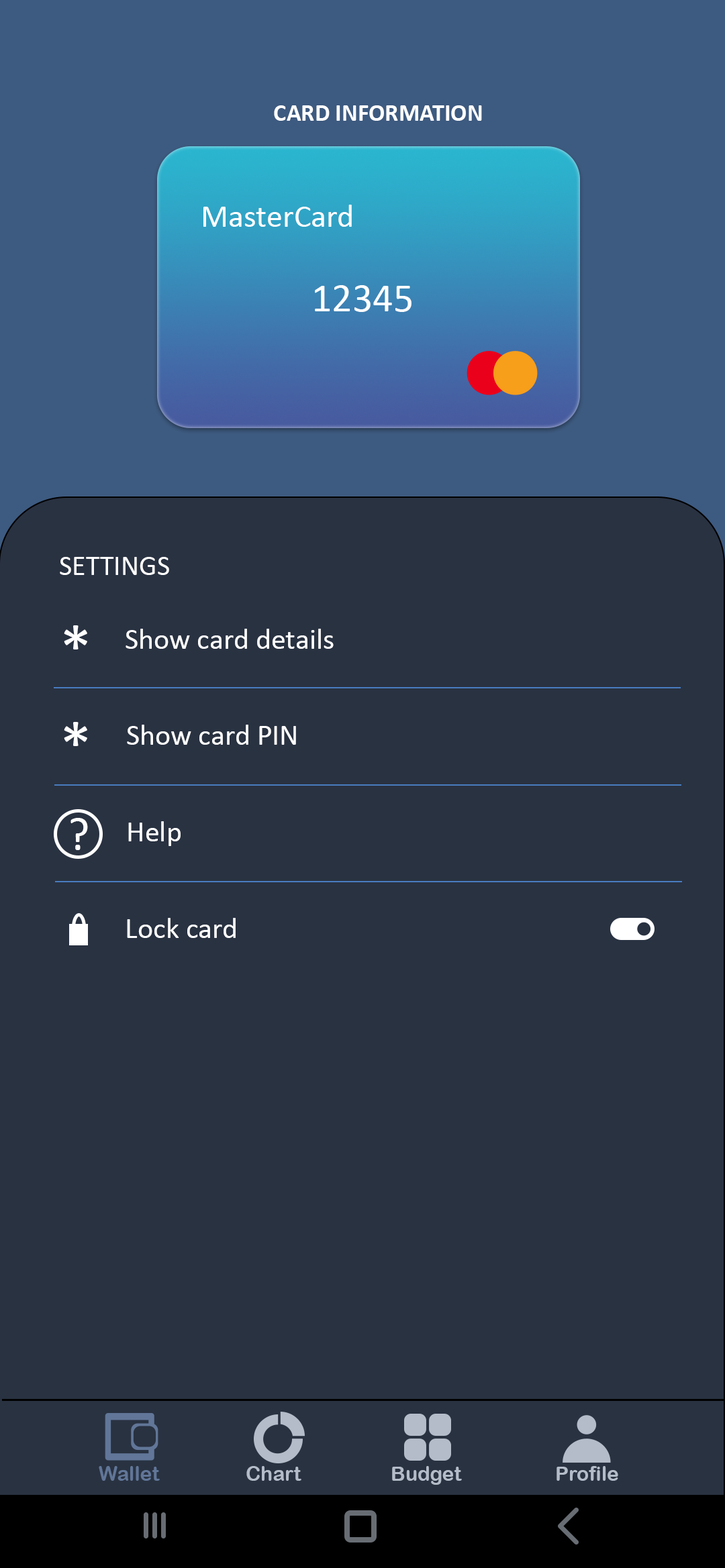
<style>
.page{position:relative;width:725px;height:1568px;background:#293241}
.page>*{position:absolute;margin:0}
.t1{font:24.2px "Calibri-Bold";color:#ffffff}
.t2{font:32.2px "Calibri";color:#ffffff}
.t3{font:40.3px "Calibri";color:#ffffff}
.t4{font:28.2px "Calibri";color:#ffffff}
.t5{font:67.1px "Calibri";color:#ffffff}
.t6{font:29.5px "Calibri";color:#ffffff}
.t7{font:46.8px "Calibri";color:#ffffff}
.t8{font:20.1px "ArialRoundedMTBold";color:#617698}
.t9{font:20.1px "ArialRoundedMTBold";color:#b4bcc9}
</style>
<div class="page">
<p class="t1" style="left:274px;top:105px;width:208px;height:16px">CARD INFORMATION</p>
<p class="t2" style="left:203px;top:205px;width:149px;height:22px">MasterCard</p>
<p class="t3" style="left:315px;top:285px;width:96px;height:27px">12345</p>
<p class="t4" style="left:60px;top:557px;width:109px;height:18px">SETTINGS</p>
<p class="t5" style="left:64px;top:625px;width:23px;height:24px">*</p>
<p class="t6" style="left:125px;top:629px;width:208px;height:20px">Show card details</p>
<p class="t5" style="left:64px;top:722px;width:23px;height:24px">*</p>
<p class="t6" style="left:127px;top:725px;width:169px;height:20px">Show card PIN</p>
<p class="t7" style="left:70px;top:818px;width:18px;height:32px">?</p>
<p class="t6" style="left:128px;top:821px;width:52px;height:25px">Help</p>
<p class="t6" style="left:127px;top:918px;width:109px;height:20px">Lock card</p>
<p class="t8" style="left:99px;top:1466px;width:61px;height:15px">Wallet</p>
<p class="t9" style="left:246px;top:1466px;width:55px;height:15px">Chart</p>
<p class="t9" style="left:392px;top:1466px;width:70px;height:19px">Budget</p>
<p class="t9" style="left:556px;top:1466px;width:62px;height:15px">Profile</p>
</div>
